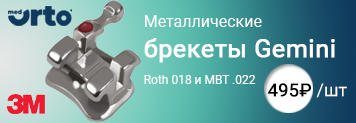
<style>
.page{position:relative;width:356px;height:123px}
.page>*{position:absolute;margin:0}
.t1{font:12px/27px "Roboto-Regular";color:#ffffff}
.t2{font:16px/27px "Roboto-Regular";color:#ffffff}
.t3{font:16px/30px "Roboto-Regular";color:#ffffff}
.t4{font:25px/30px "Roboto-Regular";color:#ffffff;font-weight:bold}
.t5{font:25px/27px "Roboto-Regular";color:#ffffff;font-weight:bold}
.t6{font:18px "Roboto-Regular";color:#000101;font-weight:bold}
.t7{font:18px "Roboto-Regular";color:#ffffff}
</style>
<div class="page">
<p class="t1" style="left:144px;top:15px;width:191px;height:69px"><span class="t2">Металл</span><span class="t3">ические<br></span><span class="t4">брек</span><span class="t5">еты Gemini<br></span>Roth 018 и MBT .022</p>
<p class="t6" style="left:268px;top:83px;width:79px;height:15px">495₽ <span class="t7">/шт</span></p>
</div>
